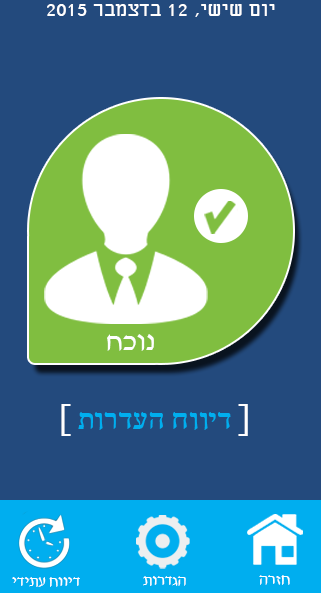
<style>
.page{position:relative;width:321px;height:593px;background:#234a7d}
.page>*{position:absolute;margin:0}
.t1{font:22px "Miriam";color:#ffffff}
.t2{font:30px "David";color:#ffffff}
.t3{font:50px "FrankRuehl";color:#ffffff}
.t4{font:35px "FrankRuehl";color:#00aeef}
.t5{font:16px "David";color:#ffffff}
</style>
<div class="page">
<p class="t1" style="left:47px;top:4px;width:228px;height:13px">2015 רבמצדב 12 ,ישיש םוי</p>
<p class="t2" style="left:107px;top:334px;width:47px;height:17px">חכונ</p>
<p class="t3" style="left:61px;top:404px;width:187px;height:32px">[                ]</p>
<p class="t4" style="left:78px;top:412px;width:153px;height:18px">תורדעה חוויד</p>
<p class="t5" style="left:12px;top:577px;width:68px;height:10px">ידיתע חוויד</p>
<p class="t5" style="left:143px;top:576px;width:43px;height:10px">תורדגה</p>
<p class="t5" style="left:259px;top:575px;width:31px;height:10px">הרזח</p>
</div>
